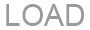
<style>
.page{position:relative;width:90px;height:30px;background:#ffffff}
.page>*{position:absolute;margin:0}
.t1{font:30px "ArialMT";color:#9a9a9a}
</style>
<div class="page">
<p class="t1" style="left:6px;top:4px;width:79px;height:22px">LOAD</p>
</div>
